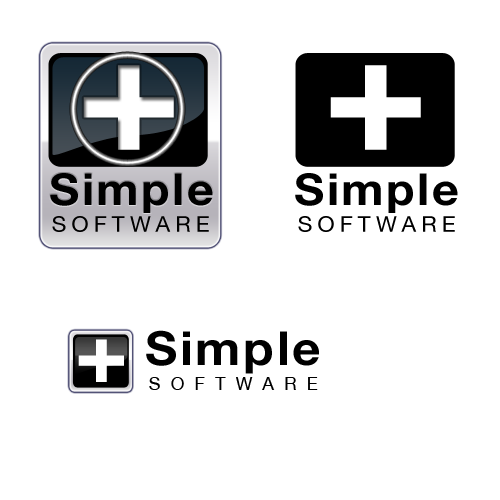
<style>
.page{position:relative;width:500px;height:500px;background:#ffffff}
.page>*{position:absolute;margin:0}
.t1{font:240.3px "Futura-CondensedMedium";letter-spacing:-0.125em;color:#ffffff;scale:1.06 1}
.t2{font:44px "HelveticaNeue-Bold";letter-spacing:0.055em;color:#000000;scale:1.06 1}
.t3{font:21.6px "HelveticaNeue";letter-spacing:0.23em;color:#000000;scale:1.04 1}
.t4{font:120.3px "Futura-CondensedMedium";letter-spacing:-0.125em;color:#ffffff;scale:1.06 1}
.t5{font:47px "HelveticaNeue-Bold";letter-spacing:0.055em;color:#000000;scale:1.06 1}
.t6{font:18px "HelveticaNeue";letter-spacing:0.57em;color:#000000}
</style>
<div class="page">
<p class="t1" style="left:83px;top:65px;width:91px;height:85px">+</p>
<p class="t1" style="left:330px;top:65px;width:91px;height:85px">+</p>
<p class="t2" style="left:50px;top:173px;width:163px;height:40px">Simple</p>
<p class="t2" style="left:295px;top:173px;width:163px;height:40px">Simple</p>
<p class="t3" style="left:52px;top:216px;width:157px;height:16px">SOFTWARE</p>
<p class="t3" style="left:298px;top:216px;width:157px;height:16px">SOFTWARE</p>
<p class="t4" style="left:78px;top:339px;width:46px;height:43px">+</p>
<p class="t5" style="left:146px;top:330px;width:173px;height:44px">Simple</p>
<p class="t6" style="left:149px;top:377px;width:169px;height:13px">SOFTWARE</p>
</div>
